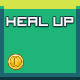
<style>
.page{position:relative;width:80px;height:80px;background:#1eb678}
.page>*{position:absolute;margin:0}
.t1{font:18px "VisitorTT1BRK";color:#ffffff}
</style>
<div class="page">
<p class="t1" style="left:6px;top:17px;width:68px;height:9px">heal up</p>
</div>
